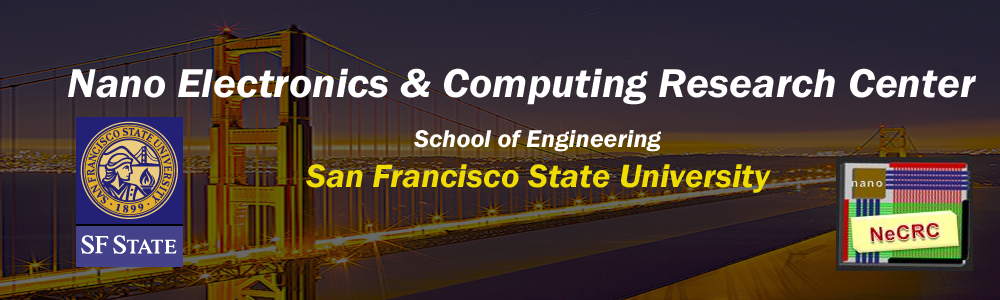
<style>
.page{position:relative;width:1000px;height:300px}
.page>*{position:absolute;margin:0}
.t1{font:41.7px "FranklinGothic-DemiItalic";color:#ffffff;scale:1.04 1}
.t2{font:33.3px "FranklinGothic-DemiItalic";color:#efdc03;scale:1.04 1}
.t3{font:25px "FranklinGothic-DemiItalic";color:#ffffff;scale:1.04 1}
</style>
<div class="page">
<p class="t1" style="left:68px;top:68px;width:908px;height:37px">Nano Electronics &amp; Computing Research Center</p>
<p class="t2" style="left:306px;top:130px;width:465px;height:63px;text-align:center"><span class="t3">School of Engineering<br></span>San Francisco State University</p>
</div>
